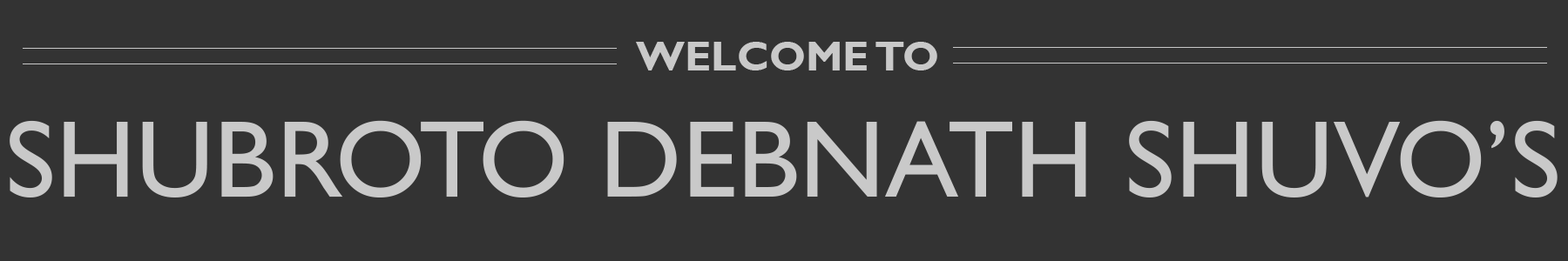
<style>
.page{position:relative;width:1568px;height:261px;background:#333333}
.page>*{position:absolute;margin:0}
.t1{font:41.8px "GillSansMT-Bold";color:#c9c9c9}
.t2{font:109.9px "GillSansMT";color:#c9c9c9}
</style>
<div class="page">
<p class="t1" style="left:636px;top:42px;width:301px;height:29px">WELCOME TO</p>
<p class="t2" style="left:10px;top:120px;width:1548px;height:78px">SHUBROTO DEBNATH SHUVO’S</p>
</div>
